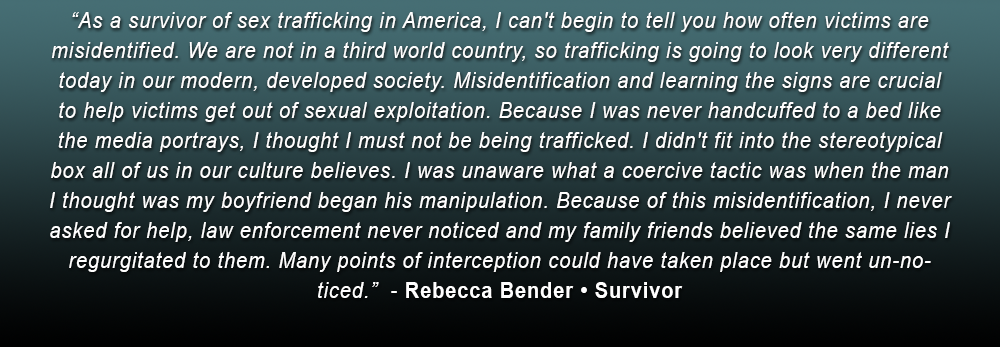
<style>
.page{position:relative;width:1000px;height:347px}
.page>*{position:absolute;margin:0}
.t1{font:21.6px/30px "Arial-ItalicMT";letter-spacing:0.05em;color:#ffffff;scale:0.92 1}
.t2{font:21.6px/30px "ArialMT";letter-spacing:0.05em;color:#ffffff;scale:0.92 1}
.t3{font:21.6px/30px "Arial-BoldMT";letter-spacing:0.05em;color:#ffffff;scale:0.92 1}
</style>
<div class="page">
<p class="t1" style="left:50px;top:12px;width:902px;height:286px;text-align:center">“As a survivor of sex trafficking in America, I can't begin to tell you how often victims are misidentified. We are not in a third world country, so trafficking is going to look very different today in our modern, developed society. Misidentification and learning the signs are crucial to help victims get out of sexual exploitation. Because I was never handcuffed to a bed like the media portrays, I thought I must not be being trafficked. I didn't fit into the stereotypical box all of us in our culture believes. I was unaware what a coercive tactic was when the man I thought was my boyfriend began his manipulation. Because of this misidentification, I never asked for help, law enforcement never noticed and my family friends believed the same lies I regurgitated to them. Many points of interception could have taken place but went un-noticed.”<span class="t2">  - </span><span class="t3">Rebecca Bender • Survivor</span></p>
</div>
